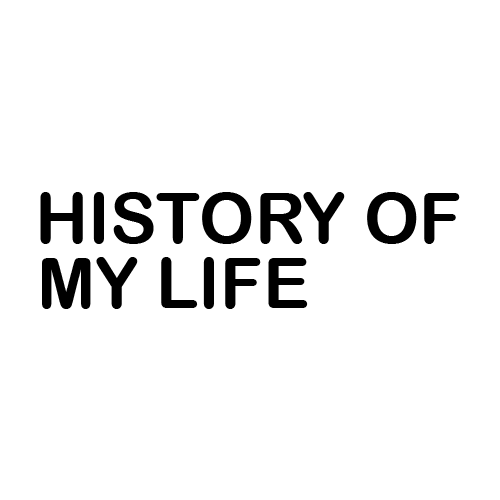
<style>
.page{position:relative;width:500px;height:500px;background:#ffffff}
.page>*{position:absolute;margin:0}
.t1{font:70px "ArialRoundedMTBold";color:#000000}
</style>
<div class="page">
<p class="t1" style="left:40px;top:192px;width:420px;height:52px">HISTORY OF</p>
<p class="t1" style="left:42px;top:257px;width:266px;height:52px">MY LIFE</p>
</div>
